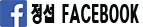
<style>
.page{position:relative;width:143px;height:27px;background:#ffffff}
.page>*{position:absolute;margin:0}
.t1{font:20.9px "HeadlineR-HM";color:#090a0a;scale:0.6 1}
</style>
<div class="page">
<p class="t1" style="left:30px;top:4px;width:109px;height:20px">정섭 FACEBOOK</p>
</div>
